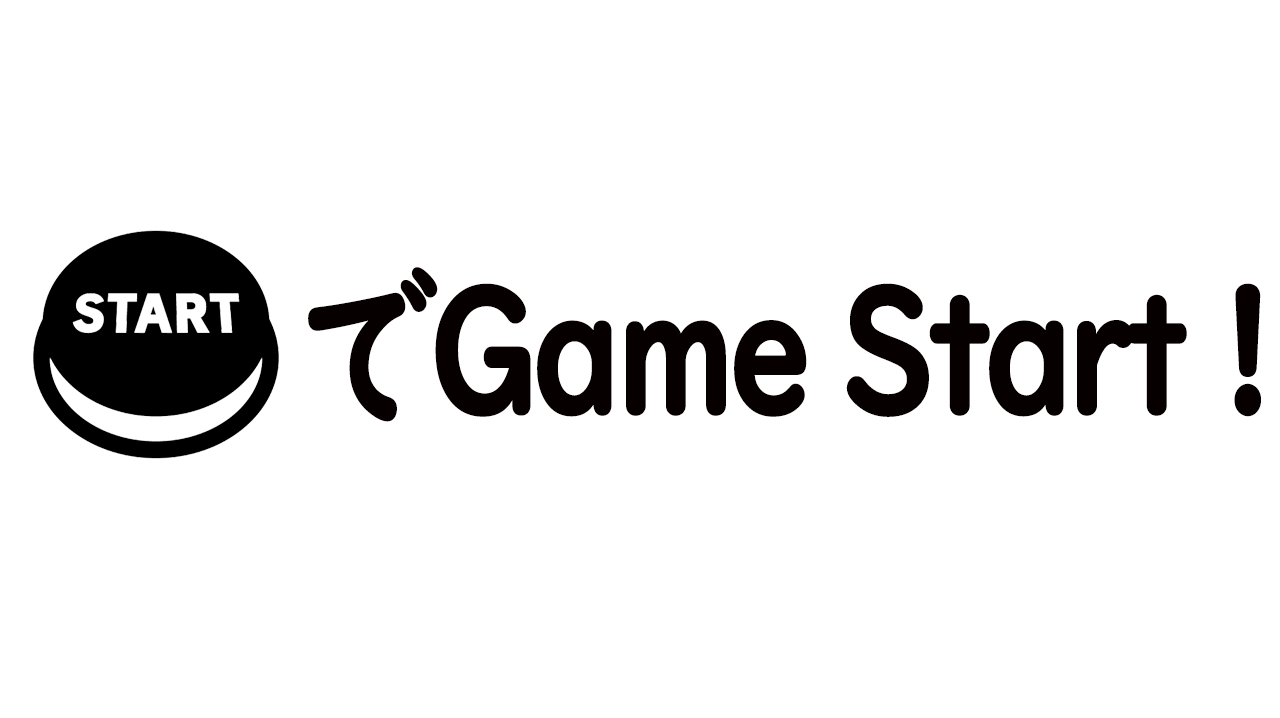
<style>
.page{position:relative;width:1280px;height:718px;background:#ffffff}
.page>*{position:absolute;margin:0}
.t1{font:170.5px "UDDigiKyokashoNK-B";letter-spacing:-0.07em;color:#060000;font-weight:bold;scale:0.8 1}
</style>
<div class="page">
<p class="t1" style="left:308px;top:267px;width:953px;height:155px">でGame Start !</p>
</div>
